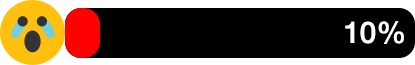
<style>
.page{position:relative;width:415px;height:65px;background:#000000}
.page>*{position:absolute;margin:0}
.t1{font:30px "HelveticaNeueCyr-Medium";color:#ffffff}
</style>
<div class="page">
<p class="t1" style="left:345px;top:21px;width:59px;height:23px">10%</p>
</div>
